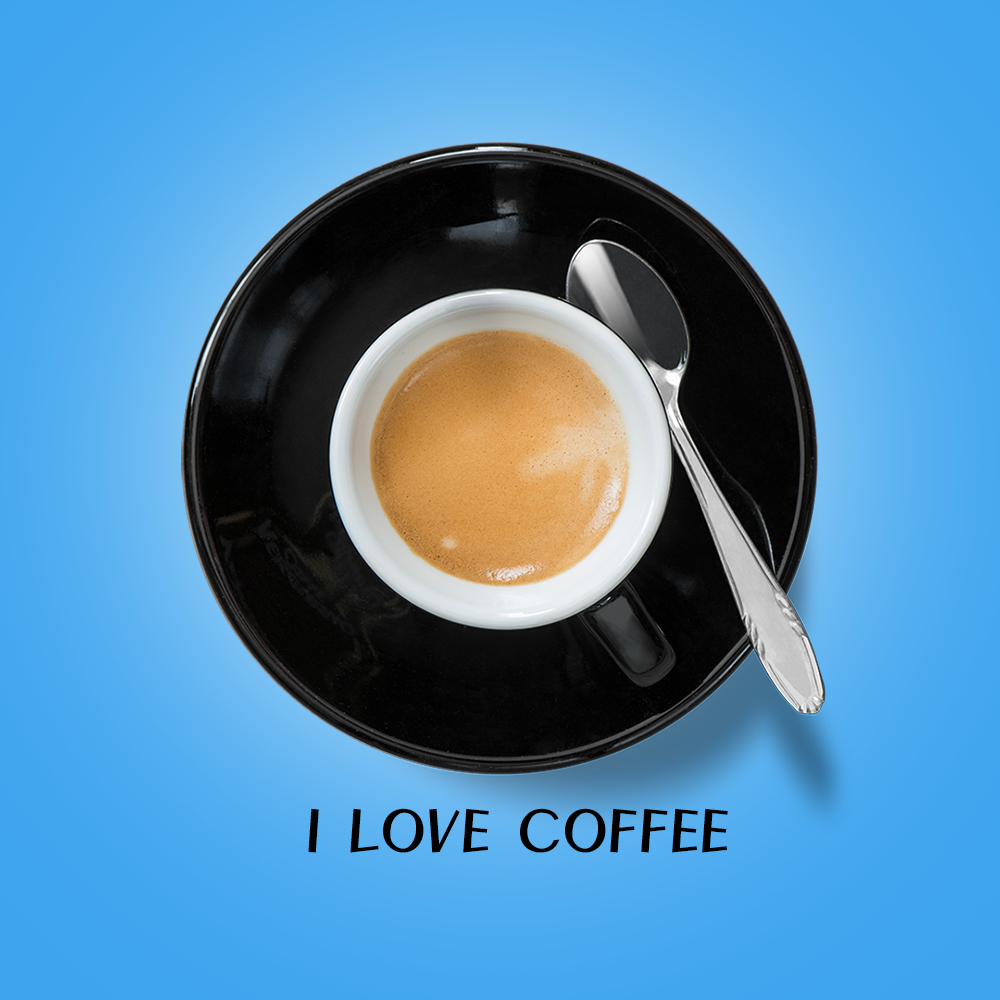
<style>
.page{position:relative;width:1000px;height:1000px}
.page>*{position:absolute;margin:0}
.t1{font:63.6px "MagicR-HM";color:#000000}
</style>
<div class="page">
<p class="t1" style="left:308px;top:808px;width:420px;height:45px">I LOVE COFFEE</p>
</div>
